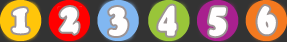
<style>
.page{position:relative;width:287px;height:42px;background:#333333}
.page>*{position:absolute;margin:0}
.t1{font:42px "CooperBlack";color:#fffefe;font-weight:bold;scale:0.71 1}
</style>
<div class="page">
<p class="t1" style="left:158px;top:5px;width:19px;height:31px">4</p>
<p class="t1" style="left:257px;top:6px;width:19px;height:29px">6</p>
<p class="t1" style="left:12px;top:8px;width:17px;height:26px">1</p>
<p class="t1" style="left:60px;top:7px;width:19px;height:27px">2</p>
<p class="t1" style="left:109px;top:7px;width:19px;height:29px">3</p>
<p class="t1" style="left:209px;top:7px;width:18px;height:30px">5</p>
</div>
